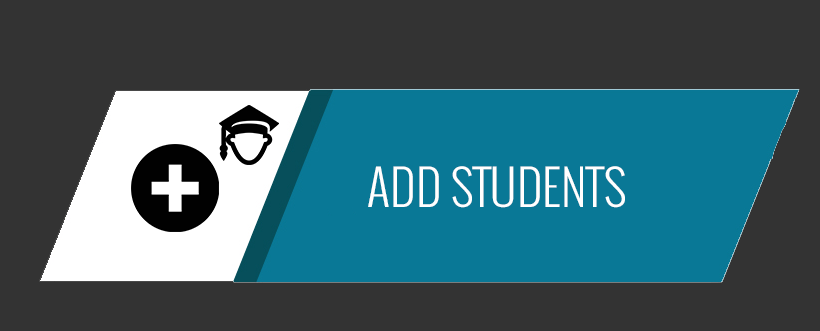
<style>
.page{position:relative;width:820px;height:331px;background:#333333}
.page>*{position:absolute;margin:0}
.t1{font:48px "Oswald-Light";color:#ffffff;text-transform:uppercase}
</style>
<div class="page">
<p class="t1" style="left:368px;top:166px;width:257px;height:42px">ADD students</p>
</div>
